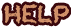
<style>
.page{position:relative;width:71px;height:28px;background:#3b080d}
.page>*{position:absolute;margin:0}
.t1{font:24px "TOBACCO";color:#c4845a;font-weight:bold}
</style>
<div class="page">
<p class="t1" style="left:4px;top:4px;width:65px;height:20px">HELP</p>
</div>
